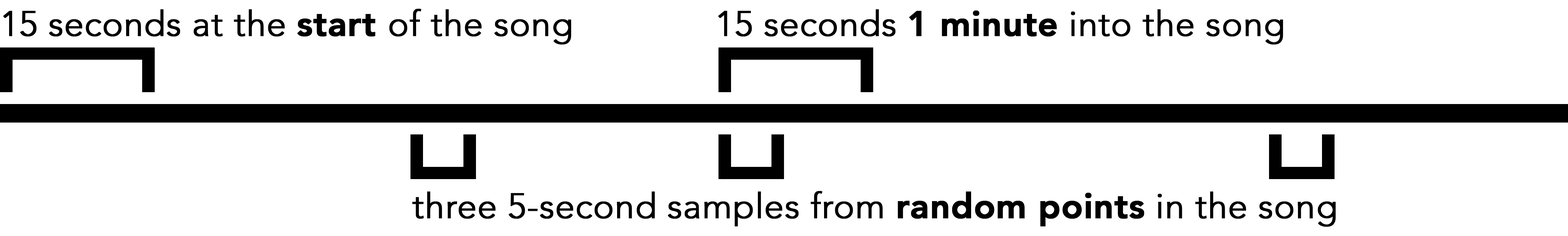
<style>
.page{position:relative;width:1568px;height:236px;background:#ffffff}
.page>*{position:absolute;margin:0}
.t1{font:34.8px "Avenir-Light";color:#000000;font-weight:bold}
.t2{font:34.8px "Avenir-Heavy";color:#000000;font-weight:bold}
</style>
<div class="page">
<p class="t1" style="left:3px;top:9px;width:568px;height:36px">15 seconds at the <span class="t2">start </span>of the song</p>
<p class="t1" style="left:718px;top:9px;width:565px;height:36px">15 seconds <span class="t2">1 minute</span> into the song</p>
<p class="t1" style="left:412px;top:191px;width:924px;height:35px">three 5-second samples from <span class="t2">random points</span> in the song</p>
</div>
